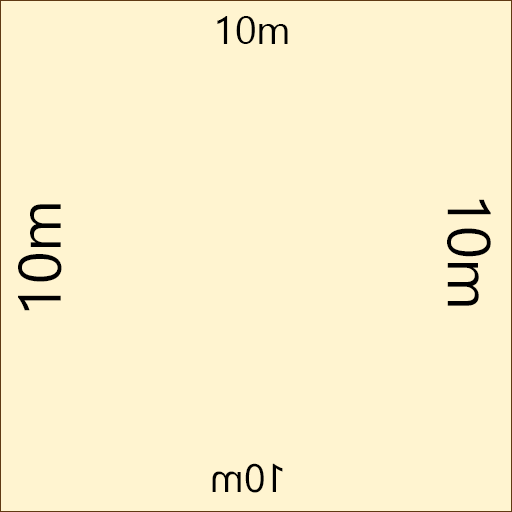
<style>
.page{position:relative;width:512px;height:512px;background:#fff4d0}
.page>*{position:absolute;margin:0}
.t1{font:40px "SegoeUI";color:#000000}
.t2{font:60px "SegoeUI";color:#000000}
.t3{font:60.3px "SegoeUI";color:#000000}
.t4{font:39.6px "SegoeUI";color:#000000}
</style>
<div class="page">
<p class="t1" style="left:217px;top:16px;width:71px;height:28px">10m</p>
<p class="t2" style="left:18px;top:204px;width:44px;height:107px;rotate:-90deg">10m</p>
<p class="t3" style="left:447px;top:199px;width:44px;height:107px;rotate:90deg">10m</p>
<p class="t4" style="left:212px;top:463px;width:71px;height:30px;rotate:180deg">10m</p>
</div>
